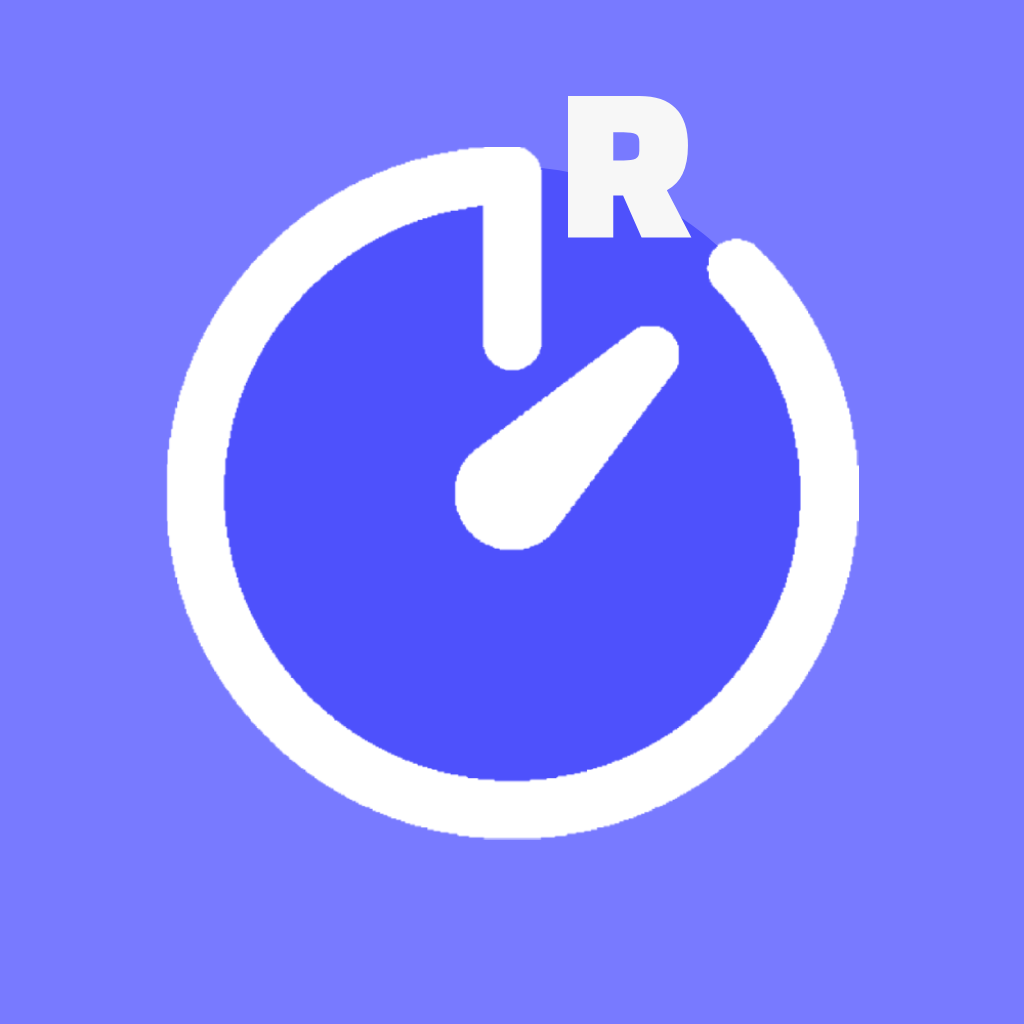
<style>
.page{position:relative;width:1024px;height:1024px;background:#787aff}
.page>*{position:absolute;margin:0}
.t1{font:188.6px "BlackHanSans-Regular";color:#f7f7f7}
</style>
<div class="page">
<p class="t1" style="left:568px;top:96px;width:124px;height:142px">R</p>
</div>
